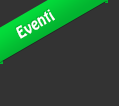
<style>
.page{position:relative;width:119px;height:106px;background:#333333}
.page>*{position:absolute;margin:0}
.t1{font:14px "HoboStd";letter-spacing:0.02em;color:#ffffff}
</style>
<div class="page">
<p class="t1" style="left:16px;top:9px;width:39px;height:30px;rotate:-30deg">Eventi</p>
</div>
